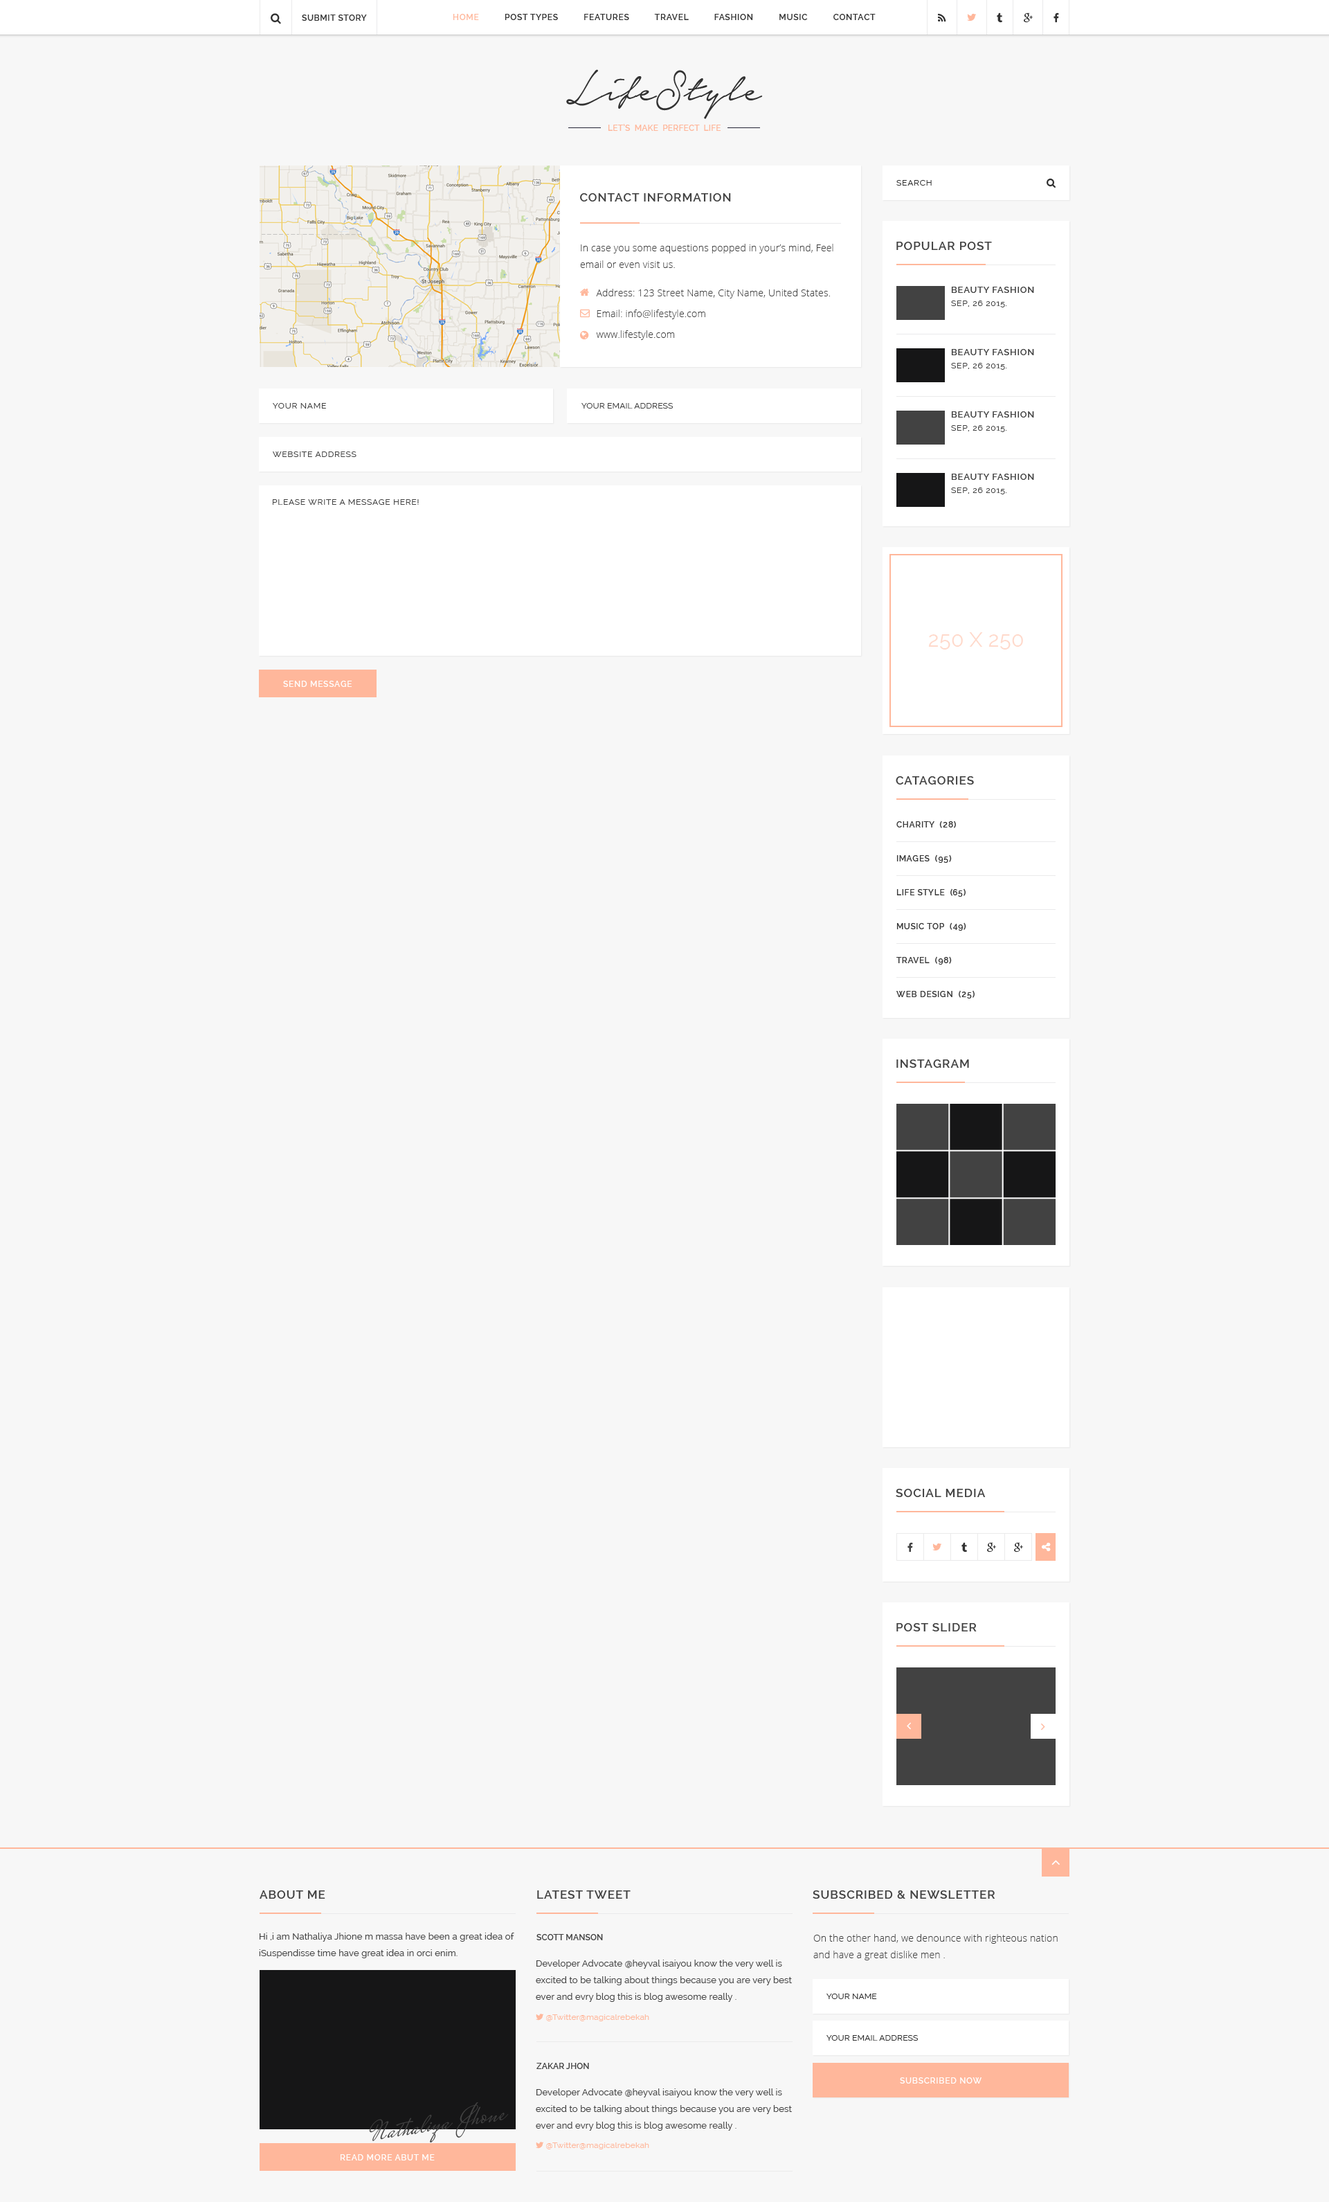
<style>
.page{position:relative;width:1329px;height:2202px;background:#f7f7f7}
.page>*{position:absolute;margin:0}
.t1{font:8.3px "Raleway-SemiBold";letter-spacing:0.05em;color:#313131;text-transform:uppercase}
.t2{font:8.3px "Raleway-SemiBold";letter-spacing:0.06em;color:#313131;text-transform:uppercase}
.t3{font:8.3px "Raleway-SemiBold";letter-spacing:0.06em;color:#ffb79b;text-transform:uppercase}
.t4{font:55.4px "NoteraPersonalUseOnly";letter-spacing:0.012em;color:#313131}
.t5{font:8.3px "Raleway-SemiBold";letter-spacing:0.012em;color:#ffb79b;text-transform:uppercase}
.t6{font:8.3px "Raleway";letter-spacing:0.06em;color:#313131;text-transform:uppercase}
.t7{font:11.8px "Raleway-SemiBold";letter-spacing:0.06em;color:#424242;text-transform:uppercase}
.t8{font:9.7px/16.6px "OpenSans-Light";letter-spacing:0.012em;color:#424242}
.t9{font:9.7px "OpenSans-Light";letter-spacing:0.012em;color:#424242}
.t10{font:9px "Raleway-SemiBold";letter-spacing:0.06em;color:#424242;text-transform:uppercase}
.t11{font:8.3px "Raleway";letter-spacing:0.06em;color:#424242;text-transform:uppercase}
.t12{font:8.3px "Raleway";letter-spacing:0.012em;color:#424242;text-transform:uppercase}
.t13{font:20.8px "Raleway";letter-spacing:0.012em;color:#ffd9cb;text-transform:uppercase}
.t14{font:8.3px "Raleway-SemiBold";letter-spacing:0.06em;color:#ffffff;text-transform:uppercase}
.t15{font:8.3px/33.9px "Raleway-SemiBold";letter-spacing:0.06em;color:#363636;text-transform:uppercase}
.t16{font:9px/16.6px "Raleway";letter-spacing:0.012em;color:#424242}
.t17{font:8.3px "Raleway-SemiBold";letter-spacing:0.012em;color:#424242;text-transform:uppercase}
.t18{font:8.3px "Raleway";letter-spacing:0.012em;color:#313131;text-transform:uppercase}
</style>
<div class="page">
<p class="t1" style="left:302px;top:15px;width:65px;height:6px">Submit Story</p>
<p class="t2" style="left:453px;top:14px;width:423px;height:6px"><span class="t3">Home          </span>Post Types          Features          Travel          Fashion          Music          Contact</p>
<p class="t4" style="left:566px;top:69px;width:197px;height:50px">LifeStyle</p>
<p class="t5" style="left:608px;top:124px;width:113px;height:7px">Let’s  Make  Perfect  Life</p>
<p class="t6" style="left:897px;top:180px;width:35px;height:6px">Search</p>
<p class="t7" style="left:580px;top:193px;width:151px;height:8px">Contact information</p>
<p class="t8" style="left:580px;top:244px;width:254px;height:24px">In case you some aquestions popped in your’s mind, Feel email or even visit us.</p>
<p class="t7" style="left:897px;top:242px;width:95px;height:8px">Popular Post</p>
<p class="t9" style="left:596px;top:289px;width:234px;height:9px">Address: 123 Street Name, City Name, United States.</p>
<p class="t10" style="left:951px;top:287px;width:83px;height:6px">Beauty Fashion</p>
<p class="t11" style="left:951px;top:300px;width:56px;height:7px">Sep, 26 2015.</p>
<p class="t9" style="left:597px;top:309px;width:108px;height:10px">Email: info@lifestyle.com</p>
<p class="t9" style="left:596px;top:330px;width:79px;height:10px">www.lifestyle.com</p>
<p class="t10" style="left:951px;top:349px;width:83px;height:6px">Beauty Fashion</p>
<p class="t11" style="left:951px;top:363px;width:56px;height:7px">Sep, 26 2015.</p>
<p class="t11" style="left:273px;top:403px;width:53px;height:5px">Your Name</p>
<p class="t12" style="left:582px;top:403px;width:91px;height:5px">Your Email Address</p>
<p class="t10" style="left:951px;top:411px;width:83px;height:6px">Beauty Fashion</p>
<p class="t11" style="left:951px;top:425px;width:56px;height:7px">Sep, 26 2015.</p>
<p class="t11" style="left:273px;top:451px;width:84px;height:6px">Website Address</p>
<p class="t10" style="left:951px;top:474px;width:83px;height:6px">Beauty Fashion</p>
<p class="t11" style="left:951px;top:487px;width:56px;height:7px">Sep, 26 2015.</p>
<p class="t11" style="left:273px;top:499px;width:146px;height:6px">Please write a message here!</p>
<p class="t13" style="left:928px;top:632px;width:95px;height:17px">250 x 250</p>
<p class="t14" style="left:283px;top:681px;width:69px;height:6px">send message</p>
<p class="t7" style="left:896px;top:776px;width:78px;height:8px">catagories</p>
<p class="t15" style="left:897px;top:820px;width:78px;height:178px">Charity  (28)<br>Images  (95)<br>Life Style  (65) <br>Music Top  (49)<br>Travel  (98)<br>web Design  (25)</p>
<p class="t7" style="left:897px;top:1059px;width:72px;height:9px">Instagram</p>
<p class="t7" style="left:896px;top:1488px;width:90px;height:9px">Social Media</p>
<p class="t7" style="left:897px;top:1623px;width:80px;height:8px">post slider</p>
<p class="t7" style="left:260px;top:1890px;width:65px;height:8px">About me</p>
<p class="t7" style="left:537px;top:1890px;width:94px;height:8px">latest tweet</p>
<p class="t7" style="left:813px;top:1890px;width:183px;height:8px">Subscribed &amp; Newsletter</p>
<p class="t16" style="left:259px;top:1932px;width:255px;height:26px">Hi ,i am Nathaliya Jhione m massa have been a great idea of iSuspendisse time have great idea in orci enim.</p>
<p class="t17" style="left:537px;top:1934px;width:66px;height:6px">Scott Manson</p>
<p class="t8" style="left:813px;top:1934px;width:245px;height:26px">On the other hand, we denounce with righteous nation and have a great dislike men .</p>
<p class="t16" style="left:536px;top:1959px;width:256px;height:42px">Developer Advocate @heyval isaiyou know the very well is excited to be talking about things because you are very best ever and evry blog this is blog awesome really .</p>
<p class="t18" style="left:827px;top:1993px;width:50px;height:6px">Your Name</p>
<p class="t18" style="left:827px;top:2035px;width:91px;height:5px">Your Email Address</p>
<p class="t17" style="left:537px;top:2062px;width:52px;height:7px">Zakar Jhon</p>
<p class="t14" style="left:900px;top:2077px;width:82px;height:6px">Subscribed Now</p>
<p class="t16" style="left:536px;top:2088px;width:256px;height:42px">Developer Advocate @heyval isaiyou know the very well is excited to be talking about things because you are very best ever and evry blog this is blog awesome really .</p>
<p class="t14" style="left:340px;top:2154px;width:95px;height:6px">read more abut me</p>
</div>
